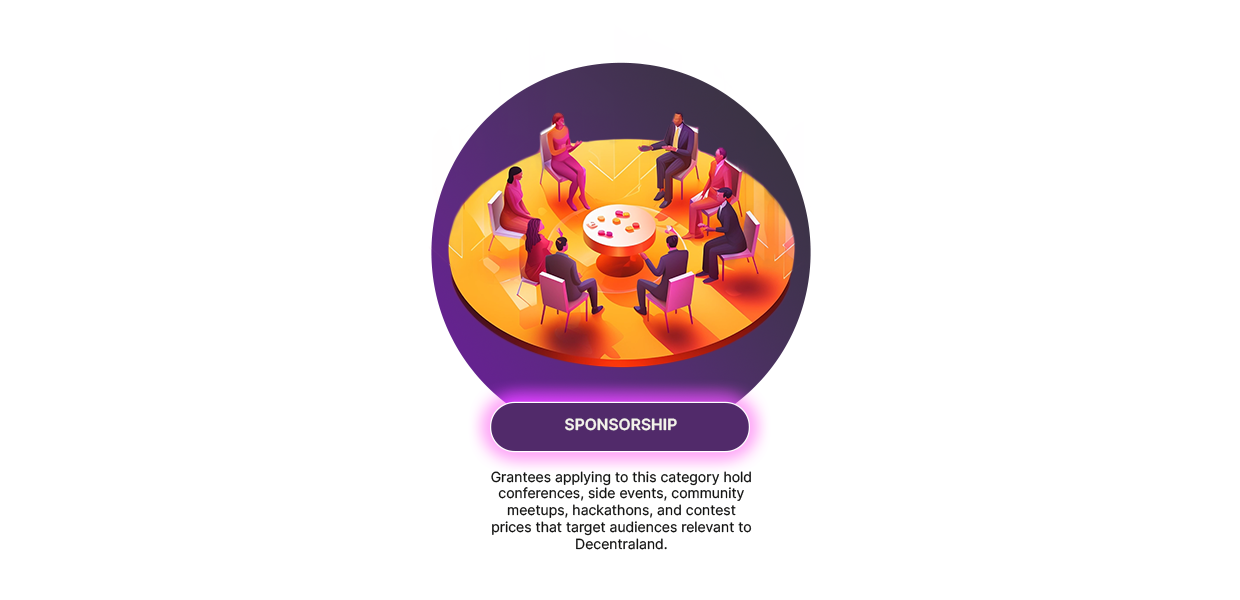
<style>
.page{position:relative;width:1240px;height:600px;background:#ffffff}
.page>*{position:absolute;margin:0}
.t1{font:15.4px "Inter-SemiBold";color:#f3f2eb;text-transform:uppercase}
.t2{font:14px "Inter-Regular";color:#131312}
</style>
<div class="page">
<p class="t1" style="left:565px;top:418px;width:112px;height:13px">Sponsorship</p>
<p class="t2" style="left:491px;top:471px;width:261px;height:79px;text-align:center">Grantees applying to this category hold conferences, side events, community meetups, hackathons, and contest prices that target audiences relevant to Decentraland.</p>
</div>
